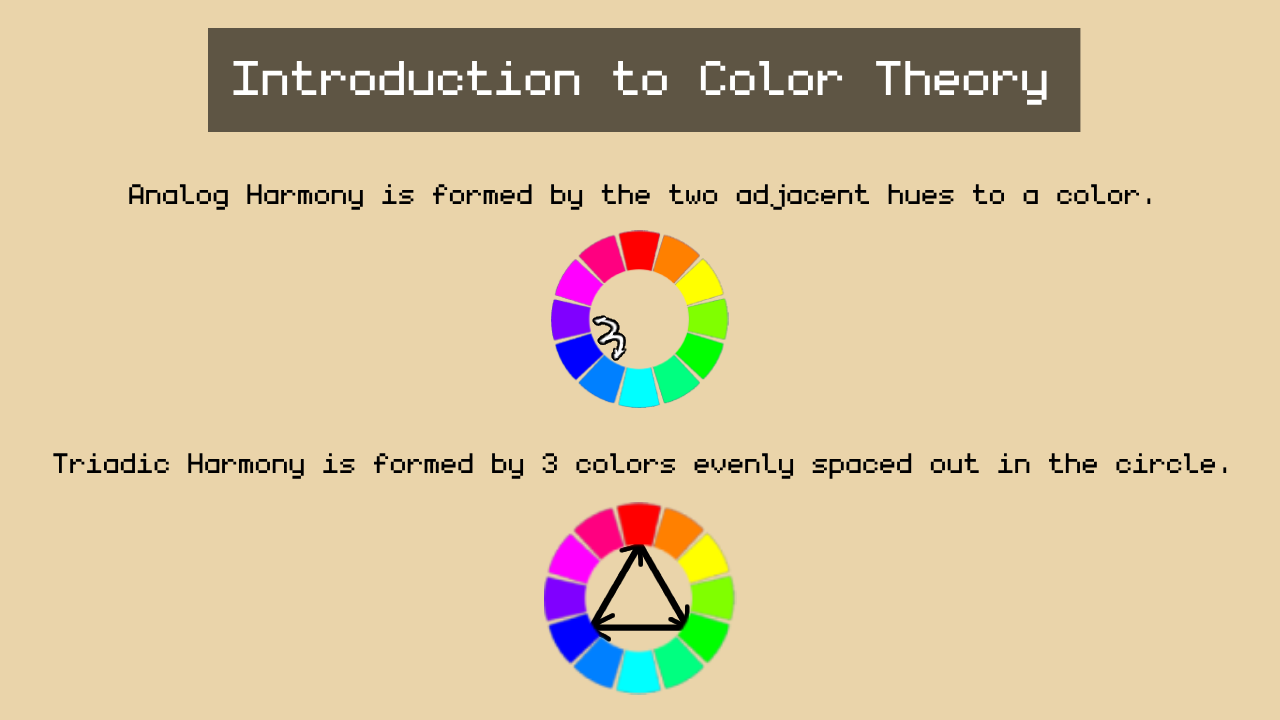
<style>
.page{position:relative;width:1280px;height:720px;background:#ead4aa}
.page>*{position:absolute;margin:0}
.t1{font:77.9px "monogram";color:#ffffff}
.t2{font:45px "monogram";color:#000000}
</style>
<div class="page">
<p class="t1" style="left:233px;top:61px;width:814px;height:44px">Introduction to Color Theory</p>
<p class="t2" style="left:129px;top:184px;width:1022px;height:26px">Analog Harmony is formed by the two adjacent hues to a color.</p>
<p class="t2" style="left:53px;top:453px;width:1174px;height:26px">Triadic Harmony is formed by 3 colors evenly spaced out in the circle.</p>
</div>
